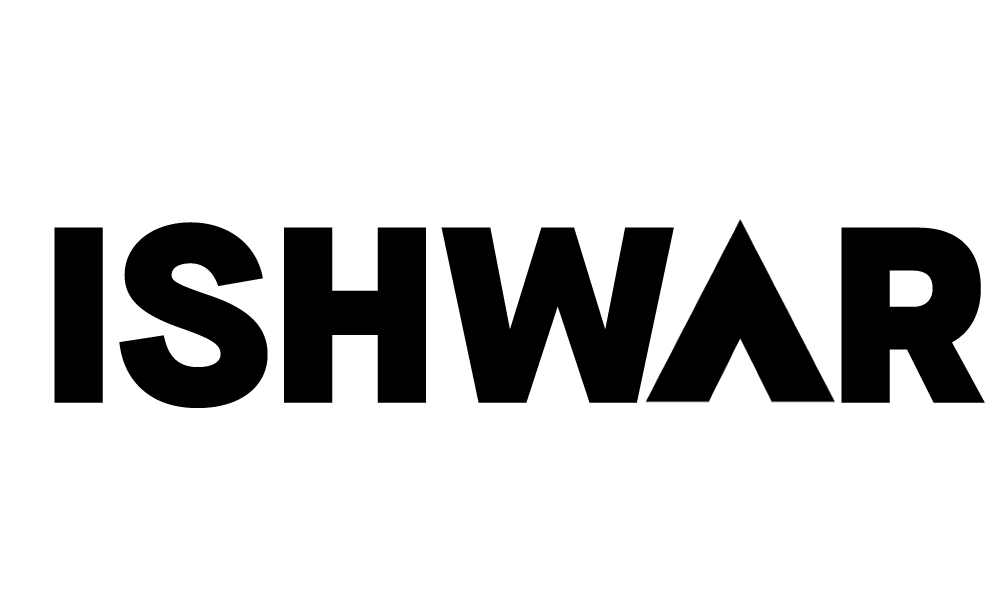
<style>
.page{position:relative;width:1000px;height:600px;background:#ffffff}
.page>*{position:absolute;margin:0}
.t1{font:250px "MaisonNeue-Black";color:#000000}
.t2{font:250px "MaisonNeue-Black";letter-spacing:0.05em;color:#000000}
</style>
<div class="page">
<p class="t1" style="left:54px;top:222px;width:931px;height:186px">ISHW<span class="t2">  R</span></p>
</div>
